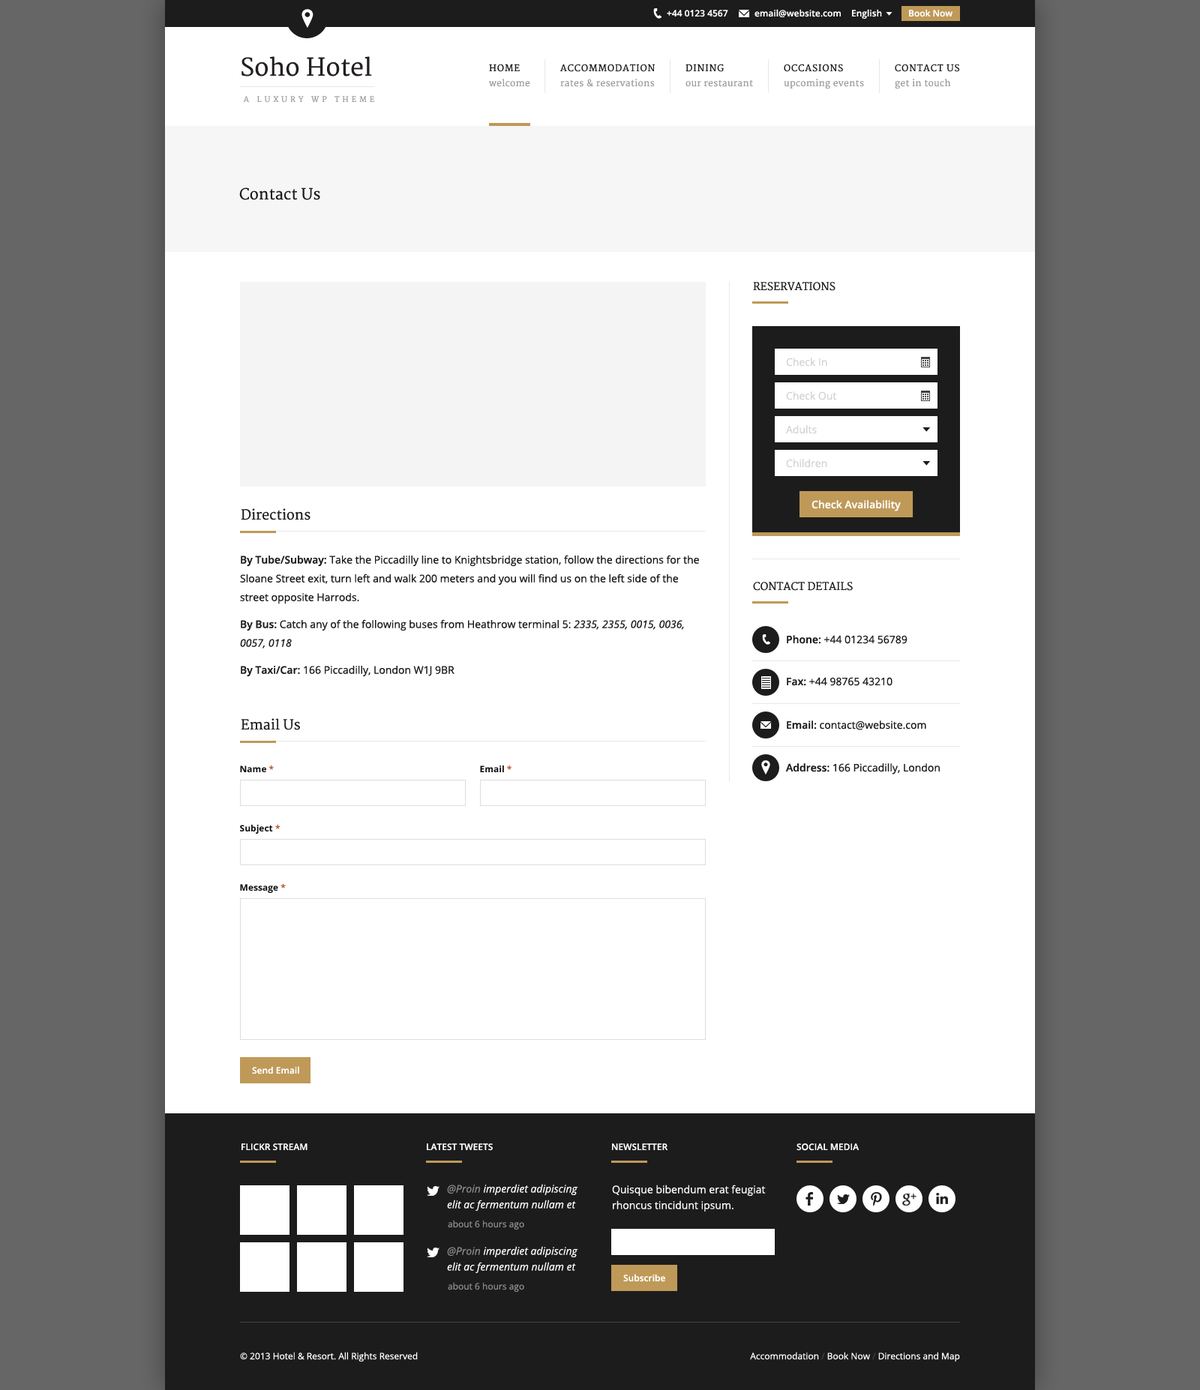
<style>
.page{position:relative;width:1200px;height:1390px;background:#ffffff}
.page>*{position:absolute;margin:0}
.t1{font:9px "OpenSans-Semibold";color:#ffffff}
.t2{font:24px "Merriweather";color:#231f20}
.t3{font:9px "Merriweather";letter-spacing:0.075em;color:#1c1c1c;text-transform:uppercase}
.t4{font:9px "Merriweather";letter-spacing:0.025em;color:#a09d9d}
.t5{font:7.5px "Merriweather";letter-spacing:0.4em;color:#a09d9d;text-transform:uppercase}
.t6{font:15px "Merriweather";color:#1c1c1c}
.t7{font:10.5px "Merriweather";color:#231f20;text-transform:uppercase}
.t8{font:10.5px "OpenSans";color:#d3d3d3}
.t9{font:13.5px "Merriweather";color:#231f20}
.t10{font:10.5px "OpenSans-Semibold";color:#ffffff}
.t11{font:10.5px/18.7px "OpenSans";color:#1c1c1c}
.t12{font:10.5px/18.7px "OpenSans-Semibold";color:#1c1c1c}
.t13{font:10.5px/27px "OpenSans-Semibold";color:#1c1c1c}
.t14{font:10.5px/18.7px "OpenSans-Italic";color:#1c1c1c}
.t15{font:10.5px "OpenSans";color:#1c1c1c}
.t16{font:10.5px "OpenSans-Semibold";color:#1c1c1c}
.t17{font:9px "OpenSans-Bold";color:#0d0d0d}
.t18{font:9px "OpenSans-Bold";color:#c3512f}
.t19{font:9px "OpenSans-Semibold";color:#ffffff;text-transform:uppercase}
.t20{font:10.5px/15.7px "OpenSans-Italic";color:#ffffff}
.t21{font:10.5px/15.7px "OpenSans-Italic";color:#8b8b8b}
.t22{font:10.5px/15.7px "OpenSans";color:#ffffff}
.t23{font:9px "OpenSans";color:#8b8b8b}
.t24{font:9px "OpenSans";color:#ffffff}
.t25{font:9px "OpenSans";color:#424242}
</style>
<div class="page">
<p class="t1" style="left:667px;top:10px;width:61px;height:7px">+44 0123 4567</p>
<p class="t1" style="left:754px;top:9px;width:87px;height:8px">email@website.com</p>
<p class="t1" style="left:852px;top:9px;width:30px;height:10px">English</p>
<p class="t1" style="left:909px;top:9px;width:43px;height:8px">Book Now</p>
<p class="t2" style="left:242px;top:56px;width:130px;height:20px">Soho Hotel</p>
<p class="t3" style="left:489px;top:64px;width:31px;height:8px">Home</p>
<p class="t3" style="left:560px;top:64px;width:95px;height:8px">Accommodation</p>
<p class="t3" style="left:686px;top:64px;width:38px;height:8px">Dining</p>
<p class="t3" style="left:784px;top:64px;width:59px;height:8px">Occasions</p>
<p class="t3" style="left:895px;top:64px;width:64px;height:8px">Contact Us</p>
<p class="t4" style="left:489px;top:79px;width:41px;height:8px">welcome</p>
<p class="t4" style="left:560px;top:79px;width:95px;height:8px">rates &amp; reservations</p>
<p class="t4" style="left:686px;top:80px;width:67px;height:7px">our restaurant</p>
<p class="t4" style="left:784px;top:79px;width:80px;height:10px">upcoming events</p>
<p class="t4" style="left:895px;top:79px;width:56px;height:10px">get in touch</p>
<p class="t5" style="left:243px;top:96px;width:131px;height:7px">A Luxury WP Theme</p>
<p class="t6" style="left:239px;top:188px;width:81px;height:12px">Contact Us</p>
<p class="t7" style="left:753px;top:282px;width:83px;height:9px">Reservations</p>
<p class="t8" style="left:786px;top:358px;width:41px;height:9px">Check In</p>
<p class="t8" style="left:786px;top:392px;width:51px;height:8px">Check Out</p>
<p class="t8" style="left:785px;top:425px;width:32px;height:9px">Adults</p>
<p class="t8" style="left:786px;top:459px;width:41px;height:9px">Children</p>
<p class="t9" style="left:241px;top:508px;width:69px;height:12px">Directions</p>
<p class="t10" style="left:812px;top:500px;width:89px;height:12px">Check Availability</p>
<p class="t11" style="left:240px;top:555px;width:459px;height:122px"><span class="t12">By Tube/Subway:</span> Take the Piccadilly line to Knightsbridge station, follow the directions for the Sloane Street exit, turn left and walk 200 meters and you will find us on the left side of the street opposite Harrods.<br><span class="t13">By</span><span class="t12"> Bus:</span> Catch any of the following buses from Heathrow terminal 5: <span class="t14">2335, 2355, 0015, 0036, 0057, 0118<br></span><span class="t13">By</span><span class="t12"> Taxi/Car:</span> 166 Piccadilly, London W1J 9BR</p>
<p class="t7" style="left:753px;top:582px;width:100px;height:9px">Contact Details</p>
<p class="t15" style="left:787px;top:635px;width:121px;height:9px"><span class="t16">Phone:</span> +44 01234 56789</p>
<p class="t15" style="left:787px;top:677px;width:105px;height:9px"><span class="t16">Fax: </span>+44 98765 43210</p>
<p class="t9" style="left:241px;top:718px;width:59px;height:12px">Email Us</p>
<p class="t15" style="left:787px;top:721px;width:139px;height:9px"><span class="t16">Email: </span>contact@website.com</p>
<p class="t17" style="left:240px;top:766px;width:34px;height:6px">Name <span class="t18">*</span></p>
<p class="t17" style="left:480px;top:766px;width:32px;height:6px">Email <span class="t18">*</span></p>
<p class="t15" style="left:785px;top:764px;width:155px;height:11px"><span class="t16">Address: </span>166 Piccadilly, London</p>
<p class="t17" style="left:240px;top:825px;width:40px;height:9px">Subject <span class="t18">*</span></p>
<p class="t17" style="left:240px;top:884px;width:46px;height:9px">Message <span class="t18">*</span></p>
<p class="t1" style="left:252px;top:1066px;width:47px;height:9px">Send Email</p>
<p class="t19" style="left:242px;top:1144px;width:66px;height:7px">Flickr Stream</p>
<p class="t19" style="left:427px;top:1144px;width:66px;height:7px">Latest Tweets</p>
<p class="t19" style="left:612px;top:1144px;width:56px;height:7px">Newsletter</p>
<p class="t19" style="left:796px;top:1144px;width:64px;height:7px">Social Media</p>
<p class="t20" style="left:447px;top:1184px;width:131px;height:27px"><span class="t21">@Proin </span>imperdiet adipiscing elit ac fermentum nullam et</p>
<p class="t22" style="left:612px;top:1185px;width:154px;height:27px">Quisque bibendum erat feugiat rhoncus tincidunt ipsum.</p>
<p class="t23" style="left:448px;top:1220px;width:76px;height:10px">about 6 hours ago</p>
<p class="t20" style="left:447px;top:1246px;width:131px;height:28px"><span class="t21">@Proin</span> imperdiet adipiscing elit ac fermentum nullam et</p>
<p class="t1" style="left:623px;top:1274px;width:42px;height:8px">Subscribe</p>
<p class="t23" style="left:448px;top:1282px;width:76px;height:10px">about 6 hours ago</p>
<p class="t24" style="left:240px;top:1352px;width:178px;height:10px">© 2013 Hotel &amp; Resort. All Rights Reserved</p>
<p class="t24" style="left:750px;top:1352px;width:210px;height:10px">Accommodation <span class="t25">/</span> Book Now <span class="t25">/</span> Directions and Map</p>
</div>
